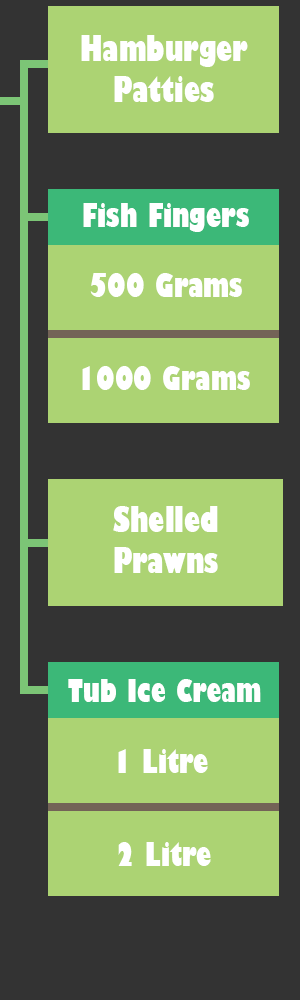
<style>
.page{position:relative;width:300px;height:1000px;background:#333333}
.page>*{position:absolute;margin:0}
.t1{font:34px "GillSans-UltraBoldCondensed";color:#ffffff}
.t2{font:32px "GillSans-UltraBoldCondensed";color:#ffffff}
.t3{font:31px "GillSans-UltraBoldCondensed";color:#ffffff}
</style>
<div class="page">
<p class="t1" style="left:81px;top:35px;width:167px;height:67px;text-align:center">Hamburger<br>Patties</p>
<p class="t2" style="left:83px;top:203px;width:166px;height:29px">Fish Fingers</p>
<p class="t2" style="left:90px;top:273px;width:152px;height:24px">500 Grams</p>
<p class="t2" style="left:82px;top:366px;width:168px;height:24px">1000 Grams</p>
<p class="t1" style="left:113px;top:506px;width:105px;height:67px;text-align:center">Shelled<br>Prawns</p>
<p class="t3" style="left:68px;top:679px;width:193px;height:23px">Tub Ice Cream</p>
<p class="t2" style="left:118px;top:749px;width:90px;height:24px">1 Litre</p>
<p class="t2" style="left:118px;top:842px;width:93px;height:24px">2 Litre</p>
</div>
